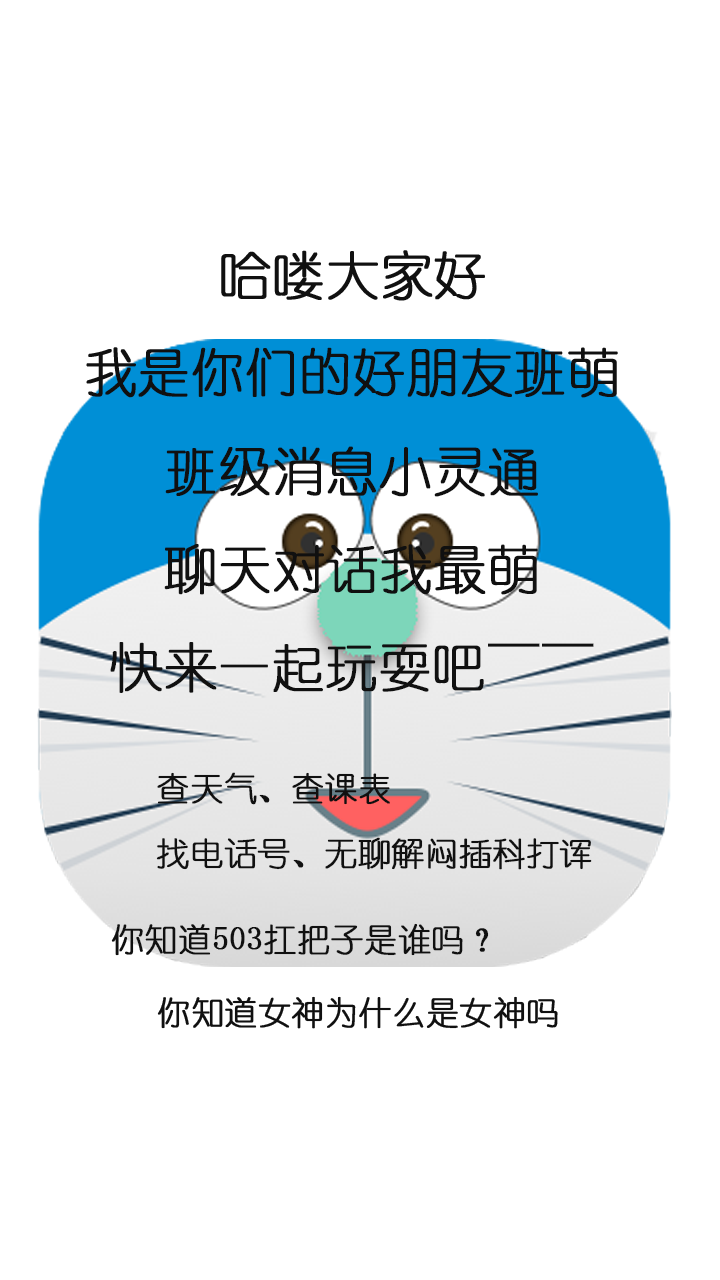
<style>
.page{position:relative;width:720px;height:1280px;background:#ffffff}
.page>*{position:absolute;margin:0}
.t1{font:52.3px "YouYuan";color:#101010;font-weight:bold}
.t2{font:32.7px/65.4px "YouYuan";color:#101010;font-weight:bold}
.t3{font:32.7px "YouYuan";color:#101010;font-weight:bold}
</style>
<div class="page">
<p class="t1" style="left:221px;top:250px;width:264px;height:51px">哈喽大家好</p>
<p class="t1" style="left:86px;top:347px;width:532px;height:51px">我是你们的好朋友班萌</p>
<p class="t1" style="left:165px;top:446px;width:373px;height:51px">班级消息小灵通</p>
<p class="t1" style="left:164px;top:544px;width:374px;height:51px">聊天对话我最萌</p>
<p class="t1" style="left:110px;top:642px;width:484px;height:51px">快来一起玩耍吧～～</p>
<p class="t2" style="left:156px;top:772px;width:436px;height:98px">查天气、查课表<br>找电话号、无聊解闷插科打诨</p>
<p class="t3" style="left:111px;top:923px;width:378px;height:33px">你知道503扛把子是谁吗？</p>
<p class="t3" style="left:157px;top:996px;width:401px;height:33px">你知道女神为什么是女神吗</p>
</div>
